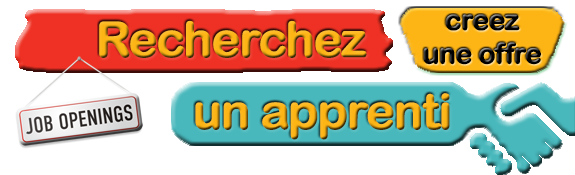
<style>
.page{position:relative;width:575px;height:175px;background:#ffffff}
.page>*{position:absolute;margin:0}
.t1{font:28px "ArialRoundedMTBold";letter-spacing:-0.04em;color:#000000;font-weight:bold}
.t2{font:48px "ArialRoundedMTBold";letter-spacing:-0.04em;color:#fdb515;font-weight:bold}
</style>
<div class="page">
<p class="t1" style="left:423px;top:14px;width:118px;height:51px;text-align:center">creez <br>une offre</p>
<p class="t2" style="left:99px;top:20px;width:268px;height:38px">Recherchez</p>
<p class="t2" style="left:195px;top:93px;width:255px;height:47px">un apprenti</p>
</div>
